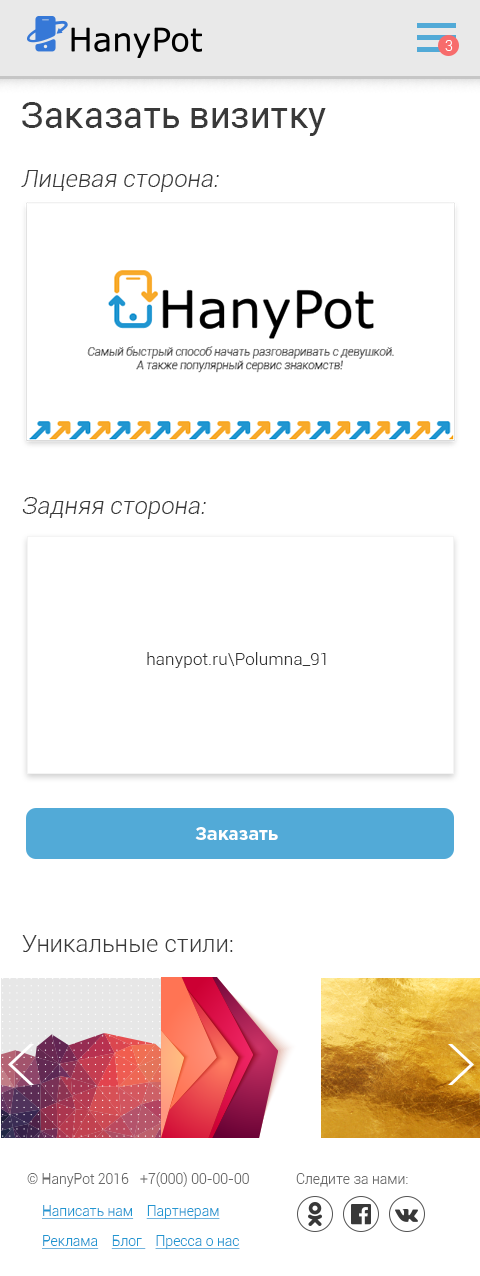
<style>
.page{position:relative;width:480px;height:1276px;background:#ffffff}
.page>*{position:absolute;margin:0}
.t1{font:14px "Roboto-Light";color:#ffffff}
.t2{font:36px "Roboto-Regular";color:#393939}
.t3{font:24px "Roboto-LightItalic";color:#393939}
.t4{font:17.3px "Roboto-Light";color:#343434}
.t5{font:18px "GothamPro-Bold";color:#ffffff}
.t6{font:24px "Roboto-Light";color:#393939}
.t7{font:14px "Roboto-Light";color:#696969}
.t8{font:14px/30px "Roboto-Light";color:#2196d1;text-decoration:underline}
.t9{font:14px "Roboto-Light";color:#2196d1;text-decoration:underline}
</style>
<div class="page">
<p class="t1" style="left:445px;top:40px;width:8px;height:11px">3</p>
<p class="t2" style="left:22px;top:102px;width:304px;height:34px">Заказать визитку</p>
<p class="t3" style="left:21px;top:170px;width:198px;height:22px">Лицевая сторона:</p>
<p class="t3" style="left:22px;top:497px;width:184px;height:22px">Задняя сторона:</p>
<p class="t4" style="left:147px;top:652px;width:179px;height:16px">hanypot.ru\Polumna_91</p>
<p class="t5" style="left:195px;top:827px;width:83px;height:13px">Заказать</p>
<p class="t6" style="left:22px;top:935px;width:211px;height:17px">Уникальные стили:</p>
<p class="t7" style="left:27px;top:1173px;width:102px;height:14px">© HanyPot 2016</p>
<p class="t7" style="left:140px;top:1172px;width:109px;height:15px">+7(000) 00-00-00</p>
<p class="t7" style="left:296px;top:1173px;width:112px;height:14px">Следите за нами:</p>
<p class="t8" style="left:42px;top:1205px;width:198px;height:44px"><span class="t9">Написать нам    </span>Партнерам    <br>Реклама    Блог    Пресса о нас</p>
</div>
